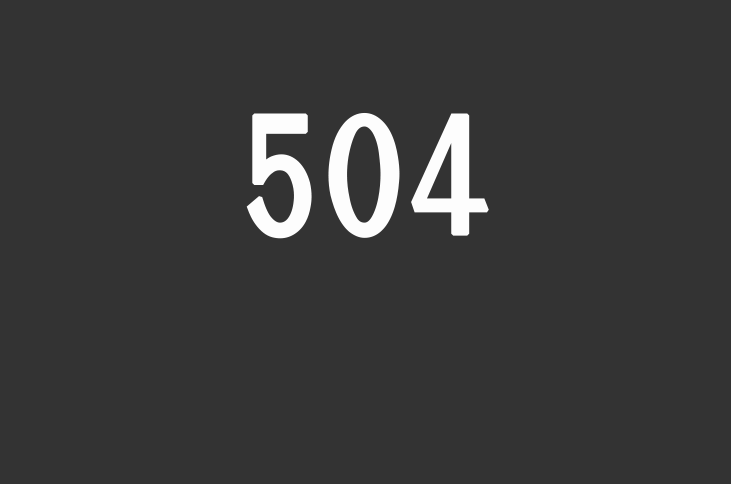
<style>
.page{position:relative;width:731px;height:484px;background:#333333}
.page>*{position:absolute;margin:0}
.t1{font:144px "HGSSoeiPresenceEB";color:#fdfdfd;font-weight:bold}
</style>
<div class="page">
<p class="t1" style="left:246px;top:112px;width:243px;height:127px">504</p>
</div>
